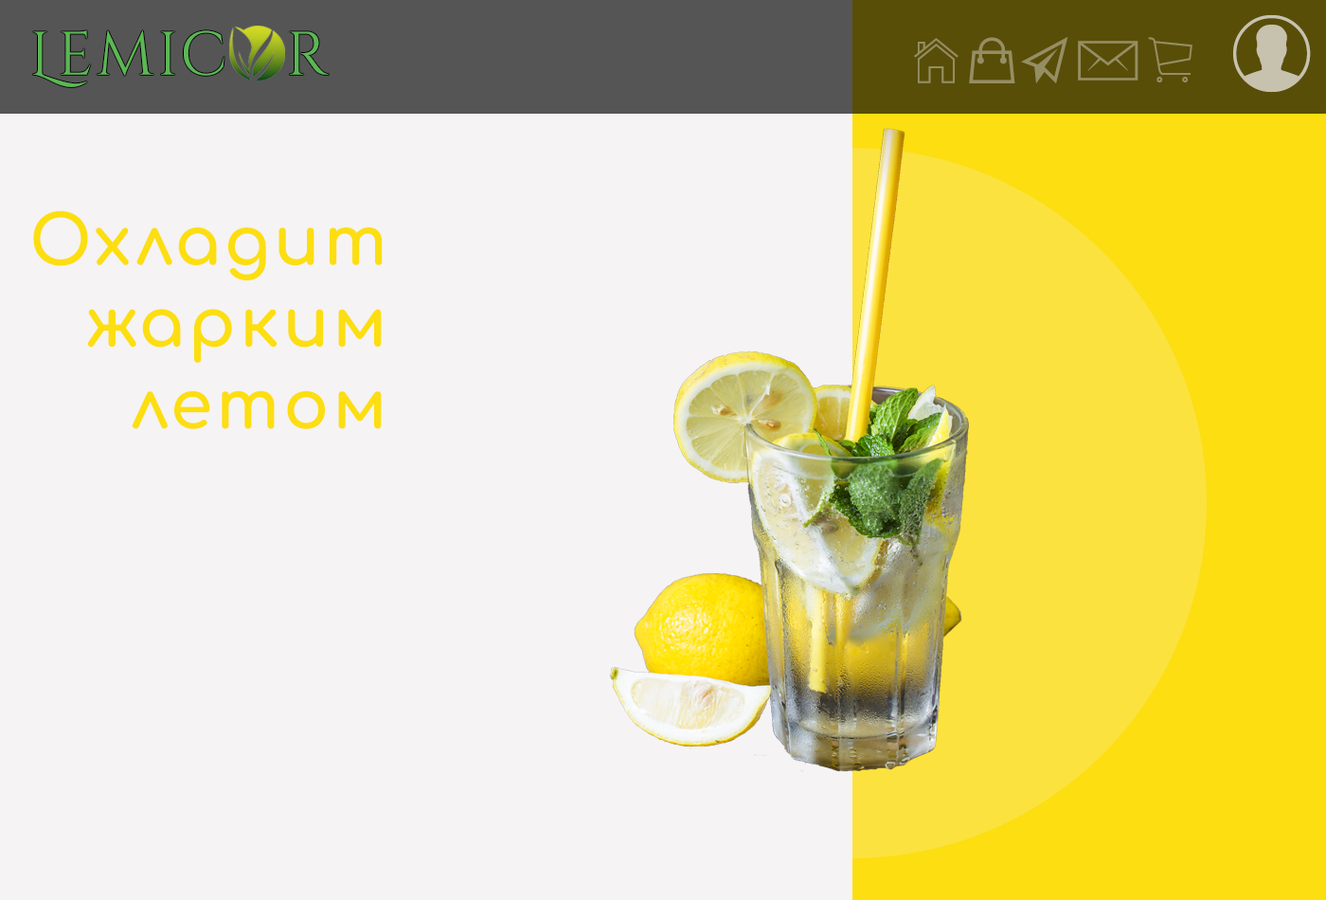
<style>
.page{position:relative;width:1326px;height:900px;background:#f5f3f4}
.page>*{position:absolute;margin:0}
.t1{font:61.4px "CinzelDecorative-Regular";letter-spacing:0.05em;color:#5cb755}
.t2{font:68.2px "Comfortaa-Bold";letter-spacing:0.05em;color:#fcde11}
</style>
<div class="page">
<p class="t1" style="left:33px;top:30px;width:296px;height:57px">Lemic   r</p>
<p class="t2" style="left:33px;top:210px;width:350px;height:219px;text-align:right">Охладит<br>жарким<br>летом</p>
</div>
